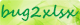
<style>
.page{position:relative;width:80px;height:25px}
.page>*{position:absolute;margin:0}
.t1{font:16px "SegoeScript-Bold";color:#009944}
</style>
<div class="page">
<p class="t1" style="left:1px;top:4px;width:78px;height:18px">bug2xlsx</p>
</div>
